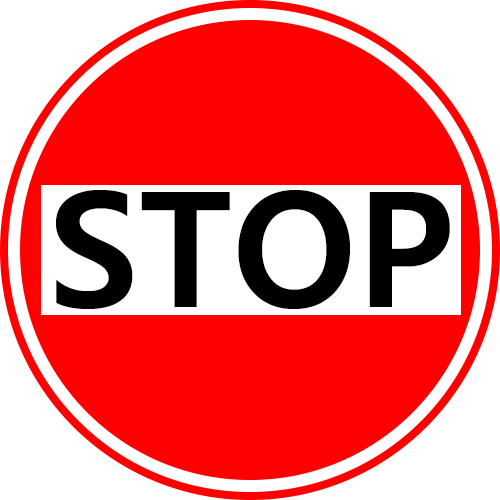
<style>
.page{position:relative;width:500px;height:500px;background:#ff0000}
.page>*{position:absolute;margin:0}
.t1{font:160px "MalgunGothicBold";color:#000000}
</style>
<div class="page">
<p class="t1" style="left:56px;top:190px;width:394px;height:119px">STOP</p>
</div>
